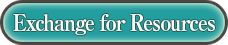
<style>
.page{position:relative;width:228px;height:45px}
.page>*{position:absolute;margin:0}
.t1{font:23px "RyuminPro-ExBold";letter-spacing:-0.08em;color:#ffffff;scale:0.9 1}
</style>
<div class="page">
<p class="t1" style="left:13px;top:14px;width:202px;height:21px">Exchange for Resources</p>
</div>
